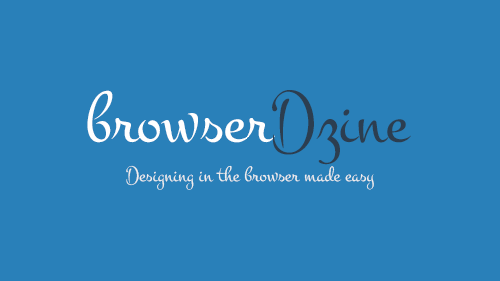
<style>
.page{position:relative;width:500px;height:281px;background:#2980b9}
.page>*{position:absolute;margin:0}
.t1{font:74.8px "Montez-Regular";color:#ffffff}
.t2{font:74.8px "Montez-Regular";color:#2c3e50}
.t3{font:22px "Montez-Regular";color:#eeeeee}
</style>
<div class="page">
<p class="t1" style="left:87px;top:90px;width:324px;height:75px">browser<span class="t2">Dzine</span></p>
<p class="t3" style="left:126px;top:165px;width:248px;height:25px">Designing in the browser made easy</p>
</div>
